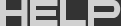
<style>
.page{position:relative;width:121px;height:26px;background:#d1d1d1}
.page>*{position:absolute;margin:0}
.t1{font:50px "Bitsumishi";color:#d1d1d1}
</style>
<div class="page">
<p class="t1" style="left:0px;top:0px;width:121px;height:26px">Help</p>
</div>
